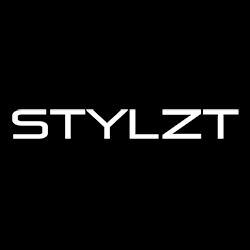
<style>
.page{position:relative;width:250px;height:250px;background:#000000}
.page>*{position:absolute;margin:0}
.t1{font:40.5px "Pirulen";color:#ffffff}
</style>
<div class="page">
<p class="t1" style="left:12px;top:109px;width:227px;height:30px">STYLZT</p>
</div>
